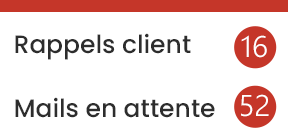
<style>
.page{position:relative;width:288px;height:140px;background:#ffffff}
.page>*{position:absolute;margin:0}
.t1{font:25px "Poppins-Medium";color:#2d2d2d}
.t2{font:30px "SegoeUI-Semilight";color:#ffffff}
</style>
<div class="page">
<p class="t1" style="left:15px;top:33px;width:176px;height:27px">Rappels client</p>
<p class="t2" style="left:241px;top:35px;width:26px;height:23px">16</p>
<p class="t1" style="left:15px;top:97px;width:200px;height:21px">Mails en attente</p>
<p class="t2" style="left:241px;top:94px;width:28px;height:23px">52</p>
</div>
